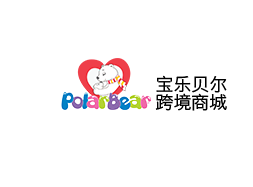
<style>
.page{position:relative;width:253px;height:187px;background:#ffffff}
.page>*{position:absolute;margin:0}
.t1{font:18px "HiraginoSansGB-W3";color:#000000}
</style>
<div class="page">
<p class="t1" style="left:156px;top:75px;width:71px;height:18px">宝乐贝尔</p>
<p class="t1" style="left:155px;top:93px;width:72px;height:18px">跨境商城</p>
</div>
